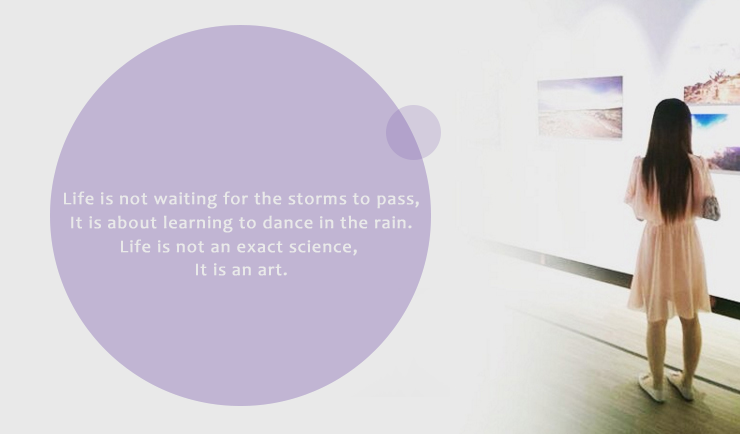
<style>
.page{position:relative;width:740px;height:434px;background:#c1b5d3}
.page>*{position:absolute;margin:0}
.t1{font:17.9px/23.8px "Candara";letter-spacing:0.04em;color:#e9e9e9;font-weight:bold}
</style>
<div class="page">
<p class="t1" style="left:64px;top:191px;width:355px;height:85px;text-align:center">Life is not waiting for the storms to pass,<br>It is about learning to dance in the rain.<br>Life is not an exact science, <br>It is an art.</p>
</div>
